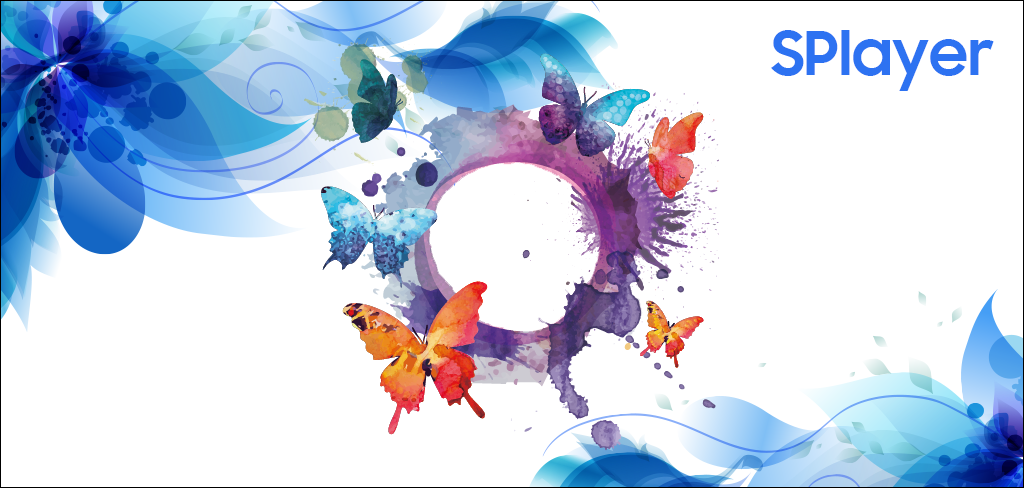
<style>
.page{position:relative;width:1024px;height:488px;background:#ffffff}
.page>*{position:absolute;margin:0}
.t1{font:60px "SamsungSharpSans-Bold";color:#2d72f1}
</style>
<div class="page">
<p class="t1" style="left:771px;top:30px;width:223px;height:61px">SPlayer</p>
</div>
